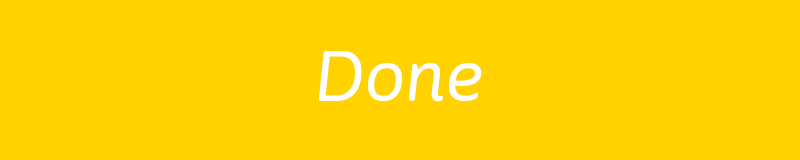
<style>
.page{position:relative;width:800px;height:160px;background:#ffd200}
.page>*{position:absolute;margin:0}
.t1{font:72px "Asap-Italic";color:#ffffff}
</style>
<div class="page">
<p class="t1" style="left:319px;top:51px;width:163px;height:51px">Done</p>
</div>
